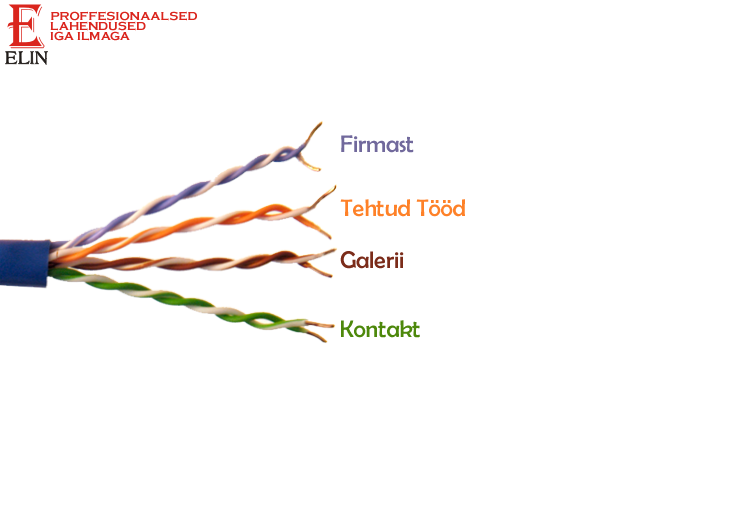
<style>
.page{position:relative;width:755px;height:507px;background:#ffffff}
.page>*{position:absolute;margin:0}
.t1{font:12px "CopperplateGothic-Bold";color:#da251d;text-transform:uppercase}
.t2{font:24px "BerlinSansFB-Reg";color:#71699c}
.t3{font:24px "BerlinSansFB-Reg";color:#fe8128}
.t4{font:24px "BerlinSansFB-Reg";color:#7b2c1a}
.t5{font:24px "BerlinSansFB-Reg";color:#4d880b}
</style>
<div class="page">
<p class="t1" style="left:51px;top:11px;width:146px;height:10px">proffesionaalsed</p>
<p class="t1" style="left:50px;top:21px;width:96px;height:10px">LAHendused</p>
<p class="t1" style="left:50px;top:31px;width:80px;height:10px">IGA Ilmaga</p>
<p class="t2" style="left:341px;top:135px;width:73px;height:18px">Firmast</p>
<p class="t3" style="left:340px;top:199px;width:125px;height:18px">Tehtud Tööd</p>
<p class="t4" style="left:340px;top:251px;width:64px;height:18px">Galerii</p>
<p class="t5" style="left:341px;top:320px;width:79px;height:18px">Kontakt</p>
</div>
